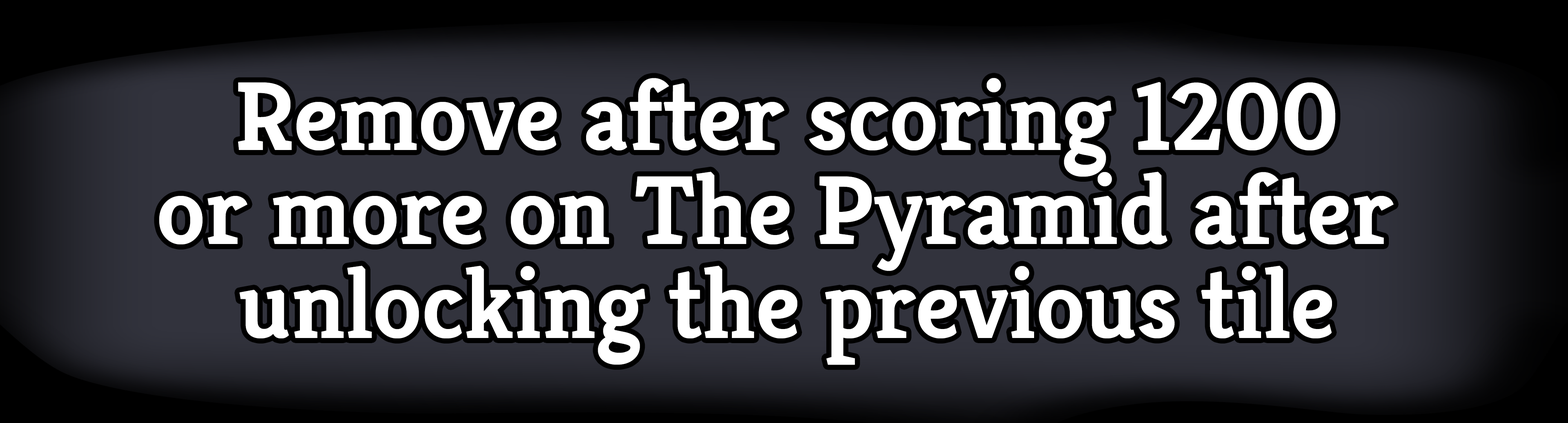
<style>
.page{position:relative;width:1568px;height:423px}
.page>*{position:absolute;margin:0}
.t1{font:98px/23.5px "Kreon-Bold";color:#ffffff}
</style>
<div class="page">
<p class="t1" style="left:159px;top:78px;width:1235px;height:287px;text-align:center">Remove after scoring 1200<br> <br><br><br>or more on The Pyramid after <br><br><br><br>unlocking the previous tile</p>
</div>
